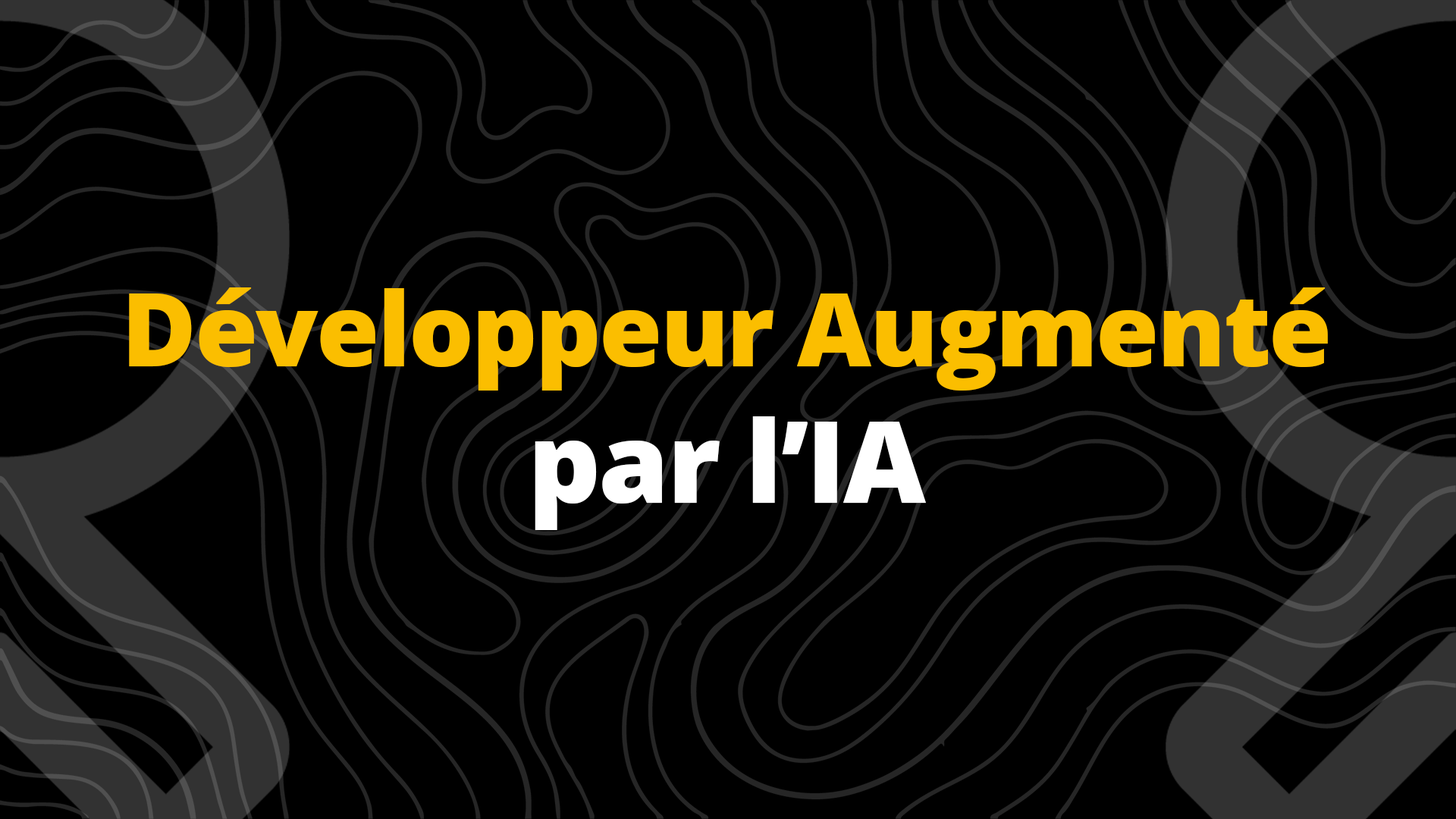
<style>
.page{position:relative;width:1456px;height:819px;background:#000000}
.page>*{position:absolute;margin:0}
.t1{font:102.3px "OpenSans-ExtraBold";letter-spacing:-0.02em;color:#fbbe00}
.t2{font:113.7px "OpenSans-ExtraBold";letter-spacing:-0.02em;color:#ffffff}
</style>
<div class="page">
<p class="t1" style="left:129px;top:287px;width:1199px;height:243px;text-align:center">Développeur Augmenté<br><span class="t2">par l’IA</span></p>
</div>
